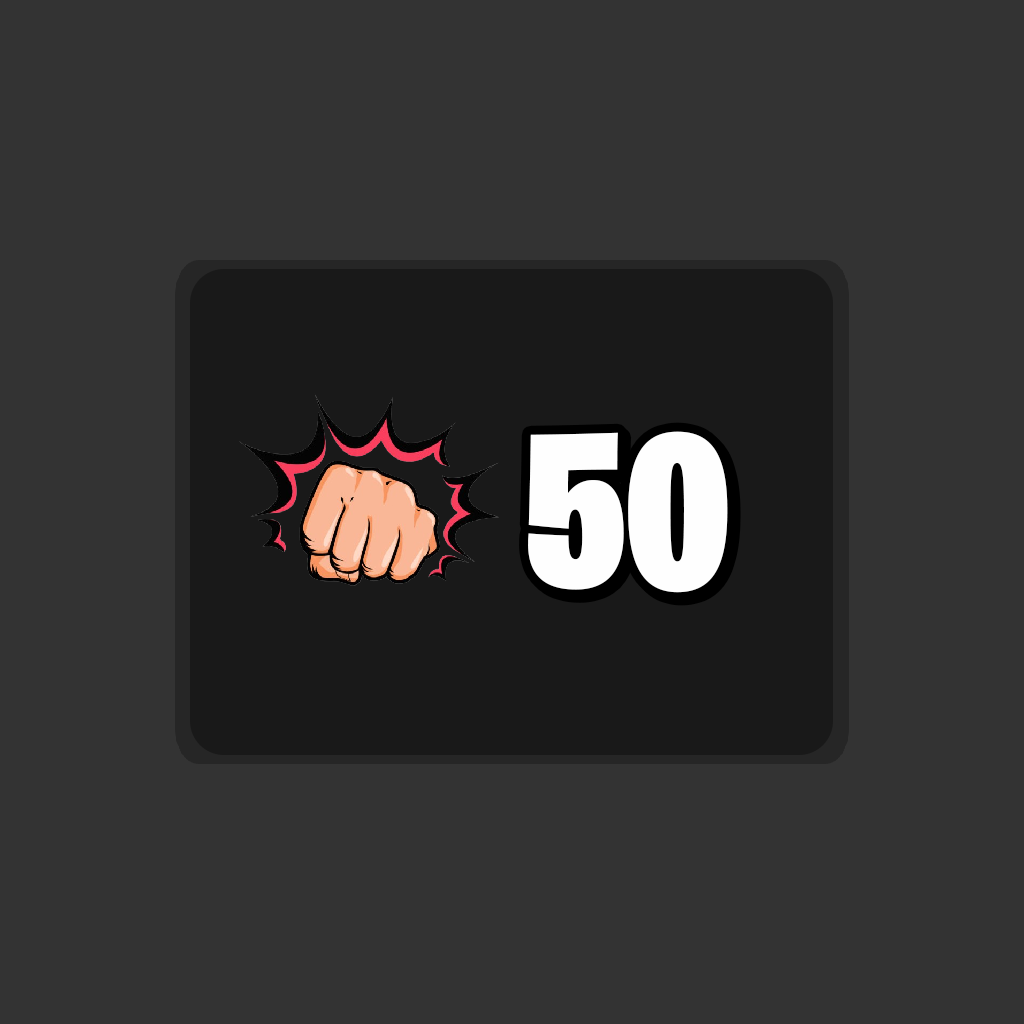
<style>
.page{position:relative;width:1024px;height:1024px;background:#333333}
.page>*{position:absolute;margin:0}
.t1{font:219.8px "BurbankBigCondensed-Black";color:#fefefe}
</style>
<div class="page">
<p class="t1" style="left:528px;top:431px;width:200px;height:162px">50</p>
</div>
